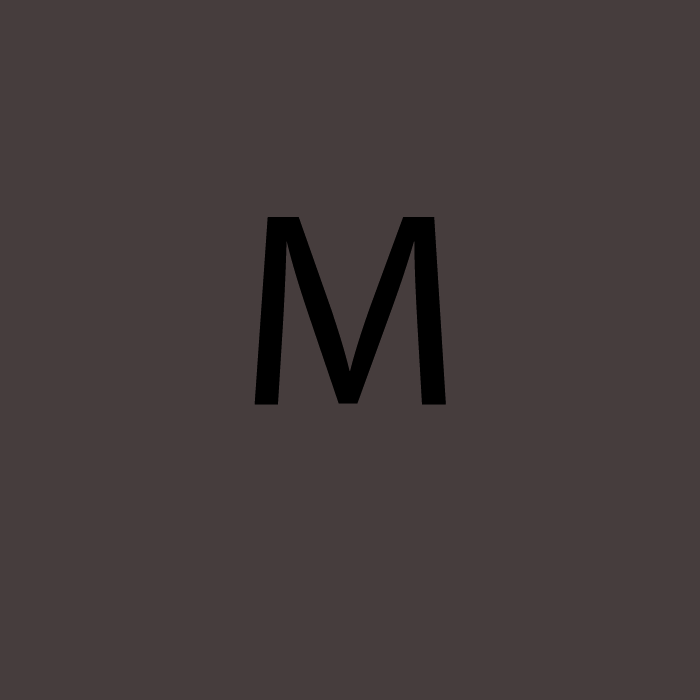
<style>
.page{position:relative;width:700px;height:700px;background:#463d3d}
.page>*{position:absolute;margin:0}
.t1{font:277.8px "MyriadPro-Regular";color:#000000}
</style>
<div class="page">
<p class="t1" style="left:254px;top:217px;width:192px;height:188px">M</p>
</div>
